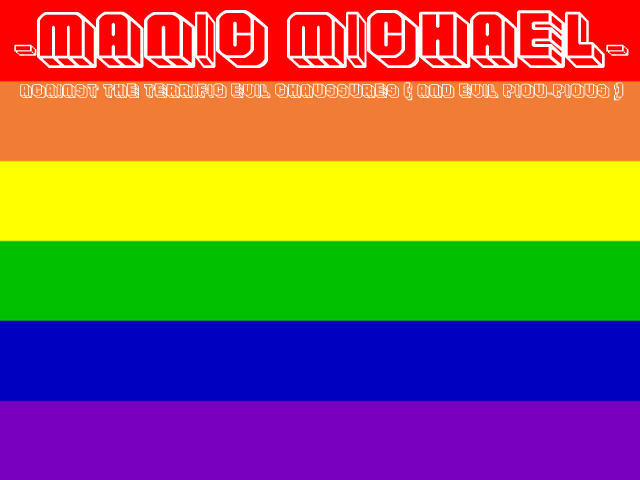
<style>
.page{position:relative;width:640px;height:480px}
.page>*{position:absolute;margin:0}
.t1{font:72px "Habbo-Regular";color:#ffffff}
.t2{font:18px "Habbo-Regular";color:#ffffff}
</style>
<div class="page">
<p class="t1" style="left:14px;top:10px;width:615px;height:58px">-Manic Michael-</p>
<p class="t2" style="left:20px;top:82px;width:604px;height:19px">against the terrific evil chaussures ( and evil piou-pious )</p>
</div>
